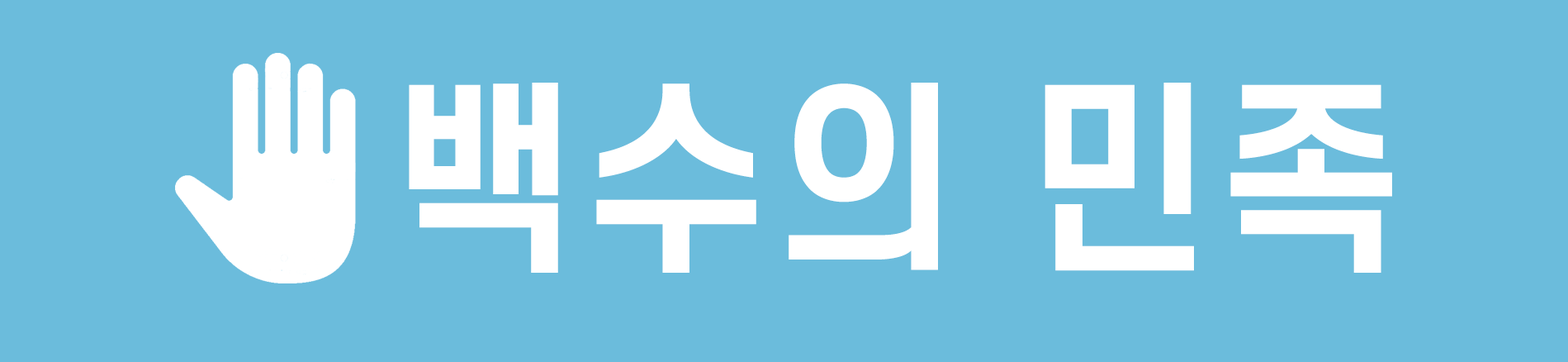
<style>
.page{position:relative;width:1568px;height:362px;background:#6bbcdc}
.page>*{position:absolute;margin:0}
.t1{font:203.4px "S-CoreDream-6Bold";letter-spacing:0.02em;color:#ffffff;scale:0.96 1}
</style>
<div class="page">
<p class="t1" style="left:409px;top:83px;width:983px;height:189px">백수의 민족</p>
</div>
